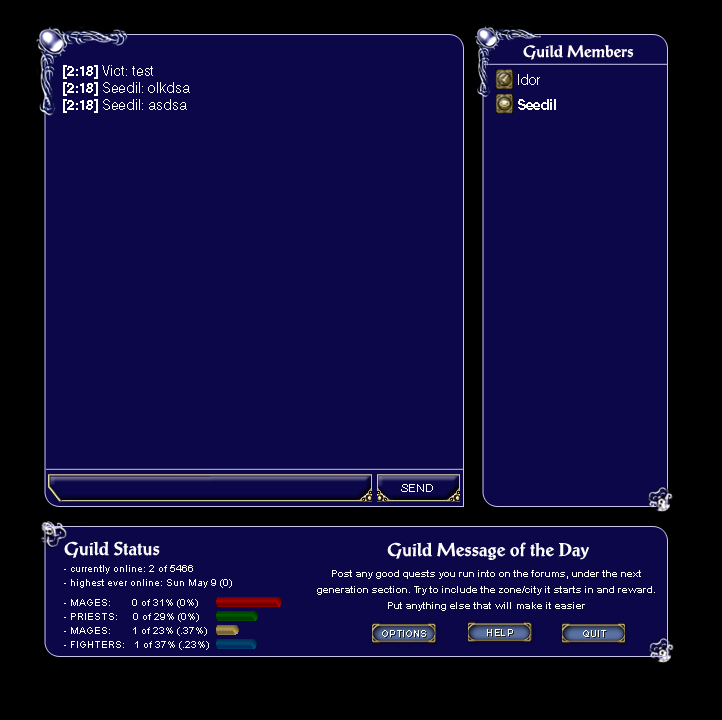
<style>
.page{position:relative;width:722px;height:720px;background:#0b0749}
.page>*{position:absolute;margin:0}
.t1{font:16px "ProseAntiqueBold";color:#fcfafa}
.t2{font:14px "Helvetica-Light";color:#fffffe}
.t3{font:14px "Helvetica-Bold";color:#fffffe}
.t4{font:14px/25px "Helvetica-Bold";color:#fffefd}
.t5{font:14px/25px "Helvetica-Light";color:#fffefd}
.t6{font:10.8px "Helvetica-Light";color:#ffffff;scale:1.11 1}
.t7{font:18px "ProseAntiqueBold";color:#fdfcfc}
.t8{font:18px "ProseAntiqueBold";color:#fefdfd}
.t9{font:10px/14px "ArialMT";color:#fffefe}
.t10{font:10px/20px "ArialMT";color:#fffefe}
.t11{font:10px/16px "Arial-BoldMT";color:#ffffff}
.t12{font:8.9px "Helvetica-Bold";color:#ffffff;scale:1.11 1}
</style>
<div class="page">
<p class="t1" style="left:523px;top:45px;width:111px;height:15px">Guild Members</p>
<p class="t2" style="left:63px;top:65px;width:127px;height:48px"><span class="t3">[2:18]</span> Vict: test<br><span class="t3">[2:18]</span> Seedil: olkdsa<br><span class="t3">[2:18]</span> Seedil: asdsa</p>
<p class="t4" style="left:518px;top:74px;width:38px;height:36px"><span class="t5">Idor<br></span>Seedil</p>
<p class="t6" style="left:401px;top:484px;width:32px;height:8px">SEND</p>
<p class="t7" style="left:64px;top:541px;width:96px;height:17px">Guild Status</p>
<p class="t8" style="left:387px;top:542px;width:202px;height:18px">Guild Message of the Day</p>
<p class="t9" style="left:64px;top:565px;width:168px;height:85px">- currently online: 2 of 5466<br>- highest ever online: Sun May 9 (0)<br><span class="t10">- MAGES:       0 of 31% (0%)<br></span>- PRIESTS:     0 of 29% (0%)<br>- MAGES:       1 of 23% (.37%)<br>- FIGHTERS:   1 of 37% (.23%)</p>
<p class="t11" style="left:317px;top:570px;width:338px;height:41px;text-align:center">Post any good quests you run into on the forums, under the next<br>generation section. Try to include the zone/city it starts in and reward.<br>Put anything else that will make it easier</p>
<p class="t12" style="left:382px;top:630px;width:44px;height:7px">OPTIONS</p>
<p class="t12" style="left:487px;top:629px;width:26px;height:7px">HELP</p>
<p class="t12" style="left:583px;top:630px;width:23px;height:7px">QUIT</p>
</div>
